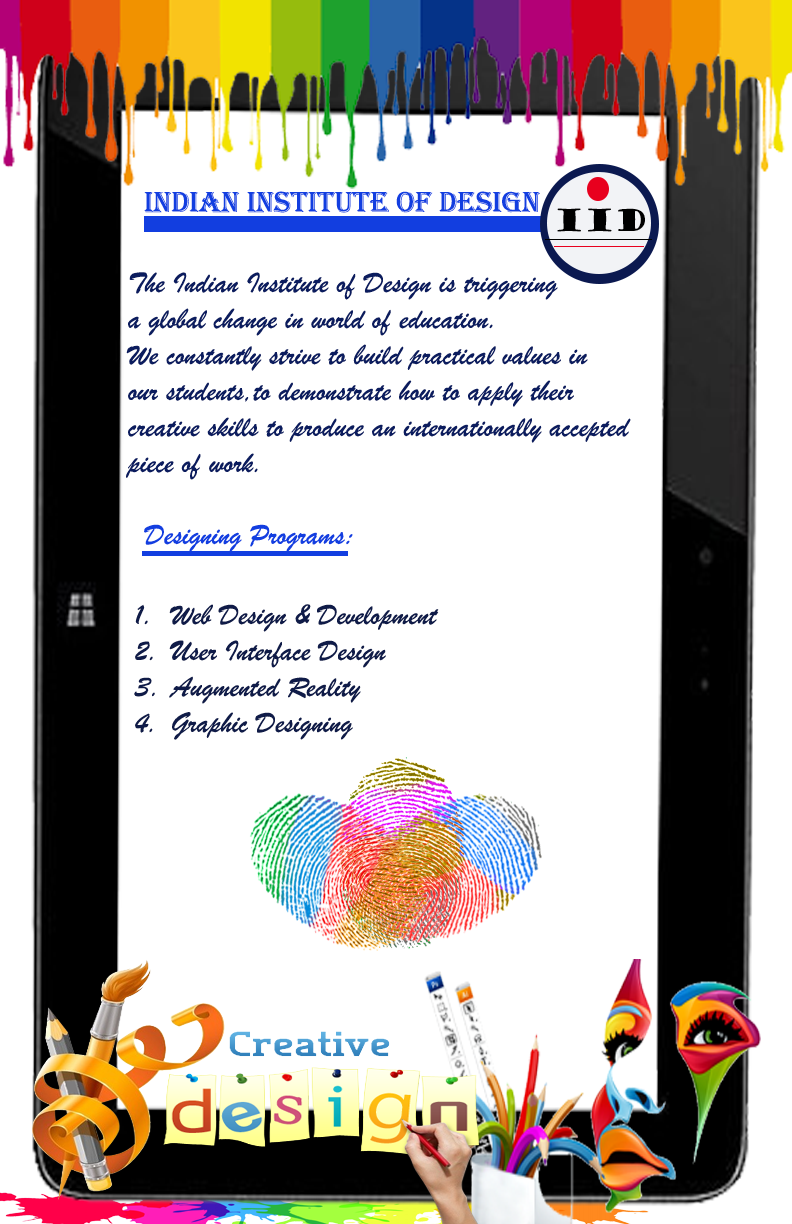
<style>
.page{position:relative;width:792px;height:1224px;background:#ffffff}
.page>*{position:absolute;margin:0}
.t1{font:30px "Algerian";color:#123ee0}
.t2{font:30px "GoudyStout";color:#000000}
.t3{font:30px "BrushScriptMT";color:#0b1c5e}
.t4{font:30px "MaturaMTScriptCapitals";color:#123ee0}
.t5{font:30px "BrushScriptMT";color:#123ee0}
.t6{font:30px "BrushScriptMT";color:#0f1b48}
</style>
<div class="page">
<p class="t1" style="left:144px;top:191px;width:396px;height:22px">indian institute of design</p>
<p class="t2" style="left:557px;top:208px;width:88px;height:24px">Iid</p>
<p class="t3" style="left:126px;top:272px;width:505px;height:280px"><span class="t4"><br></span>The Indian Institute of Design is triggering<br>a global change in world of education. <br>We constantly strive to build practical values in <br>our students,to demonstrate how to apply their <br>creative skills to produce an internationally accepted <br>piece of work. <br><span class="t5"><br>  Designing Programs:</span></p>
<p class="t6" style="left:134px;top:604px;width:305px;height:136px">1. Web Design &amp; Development<br>2. User Interface Design<br>3. Augmented Reality<br>4. Graphic Designing</p>
</div>
